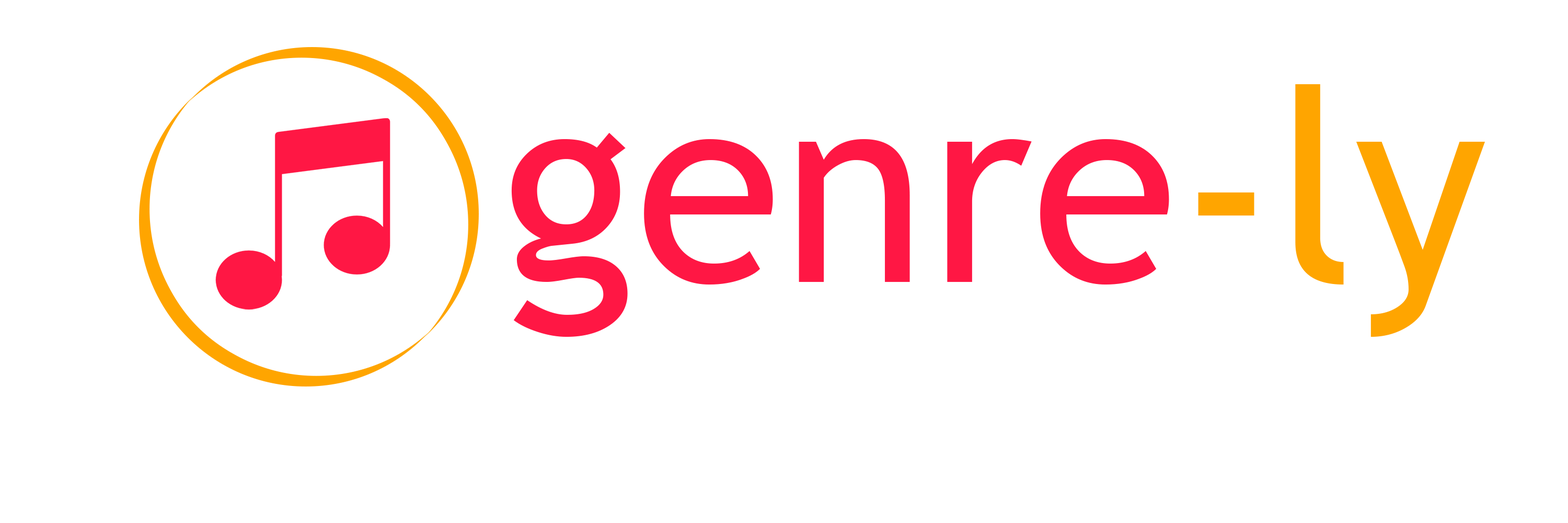
<style>
.page{position:relative;width:1568px;height:523px;background:#ffffff}
.page>*{position:absolute;margin:0}
.t1{font:267.4px "TrebuchetMS";letter-spacing:0.001em;color:#ff1744}
.t2{font:267.4px "TrebuchetMS";letter-spacing:0.001em;color:#ffa500}
</style>
<div class="page">
<p class="t1" style="left:511px;top:84px;width:974px;height:253px">genre<span class="t2">-ly</span></p>
</div>
